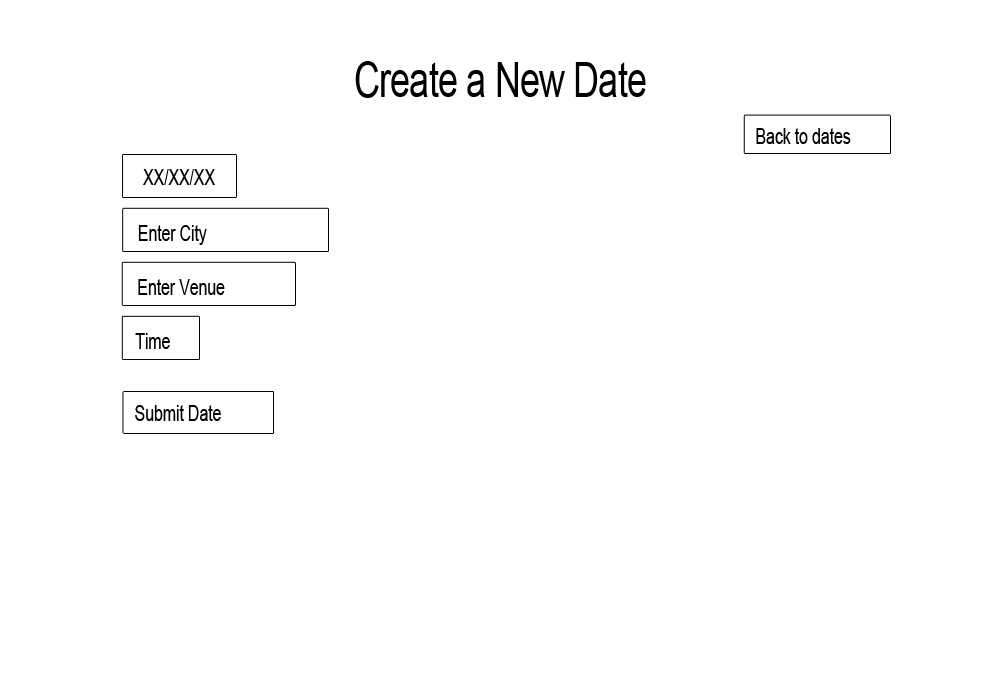
<style>
.page{position:relative;width:1000px;height:700px;background:#ffffff}
.page>*{position:absolute;margin:0}
.t1{font:48.7px "ArialMT";letter-spacing:-0.02em;color:#000000;scale:0.73 1}
.t2{font:22.3px "ArialMT";letter-spacing:-0.02em;color:#000000;scale:0.73 1}
</style>
<div class="page">
<p class="t1" style="left:355px;top:61px;width:291px;height:37px">Create a New Date</p>
<p class="t2" style="left:756px;top:128px;width:95px;height:16px">Back to dates</p>
<p class="t2" style="left:143px;top:169px;width:72px;height:16px">XX/XX/XX</p>
<p class="t2" style="left:138px;top:225px;width:69px;height:20px">Enter City</p>
<p class="t2" style="left:138px;top:279px;width:87px;height:16px">Enter Venue</p>
<p class="t2" style="left:135px;top:333px;width:35px;height:16px">Time</p>
<p class="t2" style="left:135px;top:405px;width:86px;height:16px">Submit Date</p>
</div>
